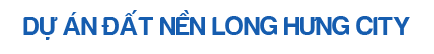
<style>
.page{position:relative;width:434px;height:54px;background:#ffffff}
.page>*{position:absolute;margin:0}
.t1{font:27.5px "FS-Harabara";color:#165daf}
</style>
<div class="page">
<p class="t1" style="left:23px;top:10px;width:387px;height:30px">DỰ ÁN ĐẤT NỀN LONG HƯNG CITY</p>
</div>
